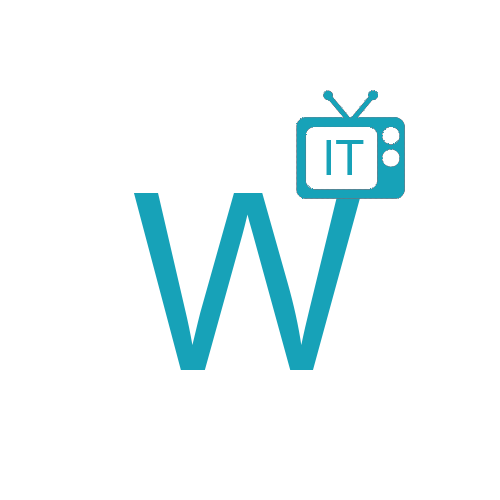
<style>
.page{position:relative;width:500px;height:500px;background:#ffffff}
.page>*{position:absolute;margin:0}
.t1{font:48px "ArialMT";color:#17a2b8}
.t2{font:247.1px "ArialMT";color:#17a2b8}
</style>
<div class="page">
<p class="t1" style="left:326px;top:140px;width:38px;height:35px">IT</p>
<p class="t2" style="left:134px;top:193px;width:228px;height:177px">W</p>
</div>
